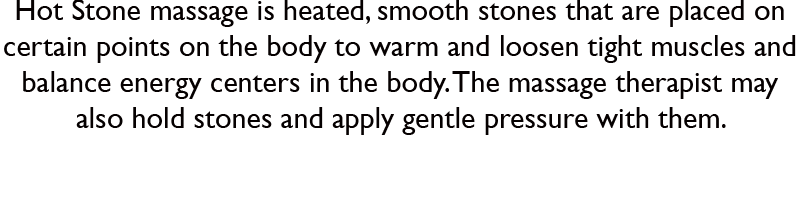
<style>
.page{position:relative;width:800px;height:200px;background:#ffffff}
.page>*{position:absolute;margin:0}
.t1{font:30px "GillSansMT";color:#050000}
</style>
<div class="page">
<p class="t1" style="left:4px;top:0px;width:792px;height:135px;text-align:center">Hot Stone massage is heated, smooth stones that are placed on certain points on the body to warm and loosen tight muscles and balance energy centers in the body. The massage therapist may also hold stones and apply gentle pressure with them.</p>
</div>
